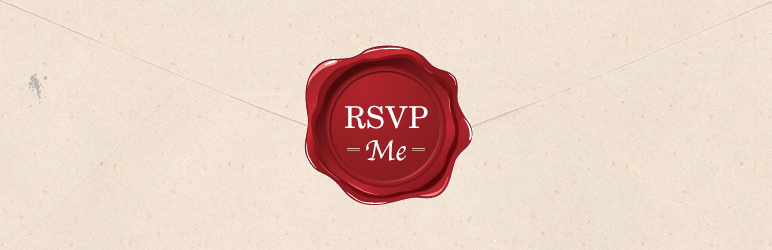
<style>
.page{position:relative;width:772px;height:250px}
.page>*{position:absolute;margin:0}
.t1{font:30px "NewCenturySchlbkLTStd-Roman";letter-spacing:0.02em;color:#ffffff}
.t2{font:30px "Apple-Chancery";letter-spacing:0.02em;color:#fffcfc}
</style>
<div class="page">
<p class="t1" style="left:345px;top:105px;width:83px;height:24px">RSVP</p>
<p class="t2" style="left:366px;top:139px;width:40px;height:22px">Me</p>
</div>
